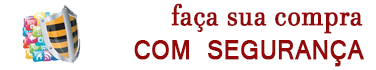
<style>
.page{position:relative;width:376px;height:70px;background:#ffffff}
.page>*{position:absolute;margin:0}
.t1{font:29.8px "JavaneseText";color:#930909;font-weight:bold;scale:0.89 1}
.t2{font:29.8px "Latha";color:#930909;font-weight:bold;scale:0.89 1}
</style>
<div class="page">
<p class="t1" style="left:171px;top:3px;width:192px;height:31px">faça sua compra</p>
<p class="t2" style="left:134px;top:40px;width:230px;height:27px">COM SEGURANÇA</p>
</div>
